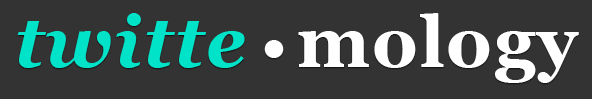
<style>
.page{position:relative;width:592px;height:99px;background:#333333}
.page>*{position:absolute;margin:0}
.t1{font:72px "Georgia-Bold";letter-spacing:0.025em;color:#ffffff}
.t2{font:72px "Georgia-BoldItalic";letter-spacing:0.025em;color:#00e3c8}
.t3{font:72px "Georgia-BoldItalic";letter-spacing:0.2em;color:#00e3c8}
.t4{font:52px "Avenir-Black";letter-spacing:0.2em;color:#ffffff}
</style>
<div class="page">
<p class="t1" style="left:17px;top:13px;width:562px;height:70px"><span class="t2">twitt</span><span class="t3">e</span><span class="t4">•</span>mology</p>
</div>
